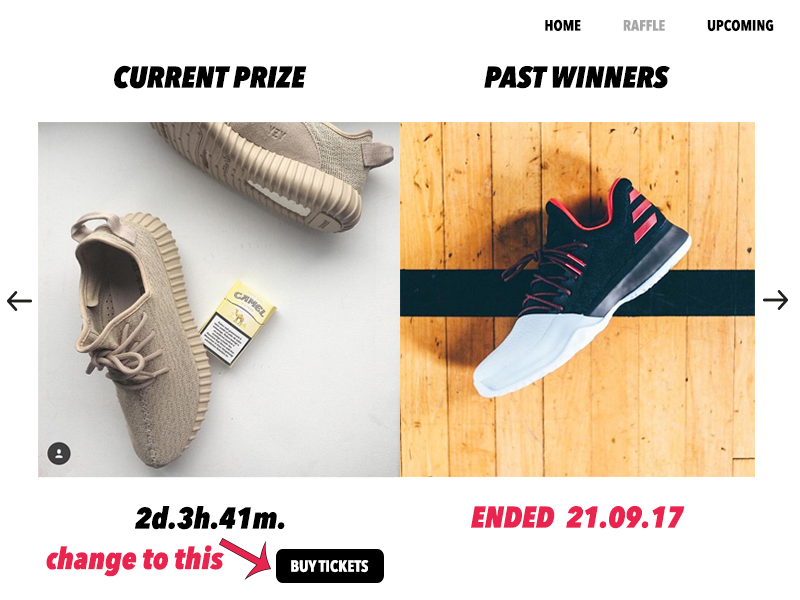
<style>
.page{position:relative;width:800px;height:600px;background:#ffffff}
.page>*{position:absolute;margin:0}
.t1{font:15px "AvenirNextCondensed-Bold";color:#000000}
.t2{font:15px "AvenirNextCondensed-Bold";color:#a6a6a6}
.t3{font:30px "AvenirNextCondensed-HeavyItalic";color:#000000}
.t4{font:30px "AvenirNextCondensed-HeavyItalic";color:#e9244f}
.t5{font:16px "AvenirNextCondensed-Bold";color:#ffffff}
</style>
<div class="page">
<p class="t1" style="left:545px;top:19px;width:229px;height:13px">HOME              <span class="t2">RAFFLE              </span>UPCOMING</p>
<p class="t3" style="left:114px;top:65px;width:193px;height:24px">CURRENT PRIZE</p>
<p class="t3" style="left:484px;top:66px;width:186px;height:23px">PAST WINNERS</p>
<p class="t3" style="left:135px;top:506px;width:150px;height:24px">2d.3h.41m.</p>
<p class="t4" style="left:471px;top:506px;width:214px;height:23px">ENDED  21.09.17</p>
<p class="t4" style="left:46px;top:545px;width:178px;height:32px">change to this</p>
<p class="t5" style="left:291px;top:560px;width:78px;height:13px">BUY TICKETS</p>
</div>
